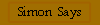
<style>
.page{position:relative;width:100px;height:25px;background:#a16e00}
.page>*{position:absolute;margin:0}
.t1{font:13.9px "FootlightMTLight";color:#000000}
</style>
<div class="page">
<p class="t1" style="left:18px;top:6px;width:63px;height:13px">Simon Says</p>
</div>
